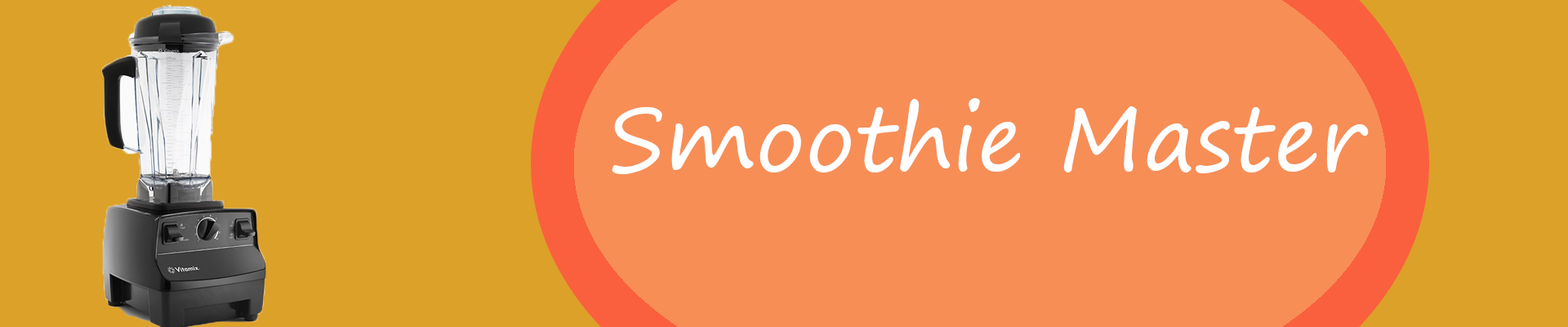
<style>
.page{position:relative;width:1568px;height:327px;background:#f78e56}
.page>*{position:absolute;margin:0}
.t1{font:88.5px "SegoePrint";color:#ffffff}
</style>
<div class="page">
<p class="t1" style="left:612px;top:98px;width:757px;height:76px">Smoothie Master</p>
</div>
